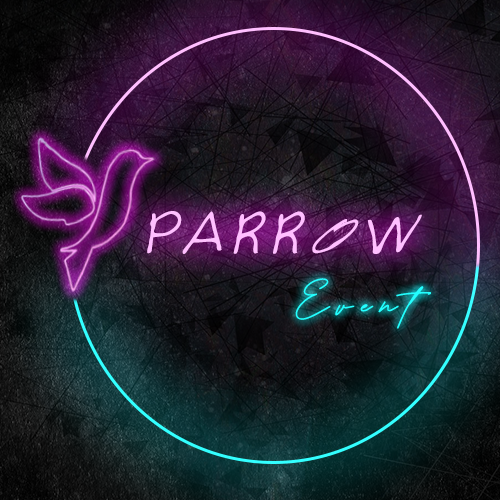
<style>
.page{position:relative;width:500px;height:500px}
.page>*{position:absolute;margin:0}
.t1{font:50.2px "Byfield";letter-spacing:0.2em;color:#ffbfff;font-style:italic}
.t2{font:75.5px "SummerFaith-Regular";letter-spacing:0.1em;color:#23ffff;font-weight:bold}
</style>
<div class="page">
<p class="t1" style="left:147px;top:211px;width:275px;height:43px">PARROW</p>
<p class="t2" style="left:295px;top:278px;width:136px;height:51px">Event</p>
</div>
